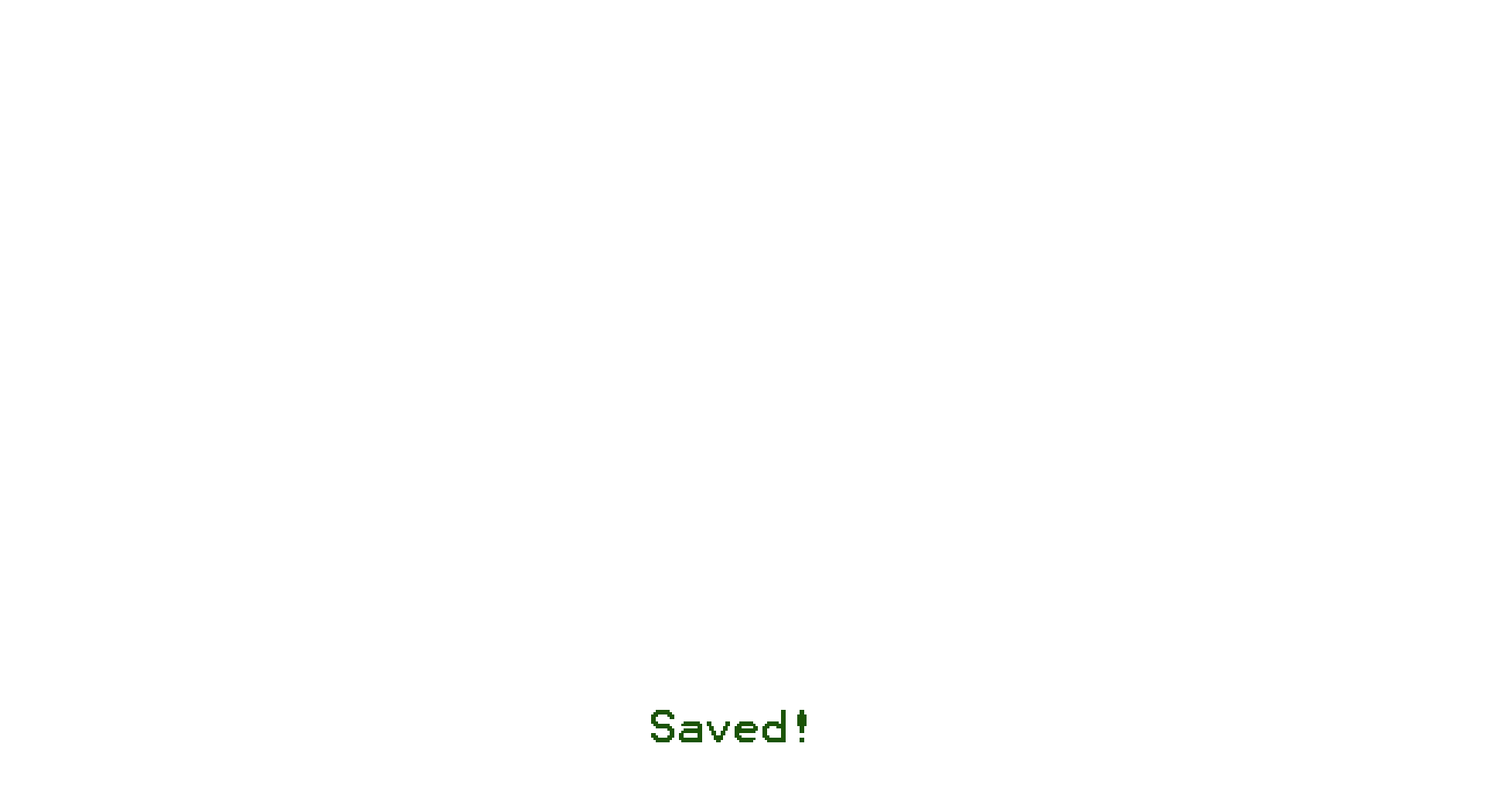
<style>
.page{position:relative;width:1494px;height:798px;background:#ffffff}
.page>*{position:absolute;margin:0}
.t1{font:37.1px "Terminal";color:#1b5407}
</style>
<div class="page">
<p class="t1" style="left:651px;top:710px;width:156px;height:32px">Saved!</p>
</div>
